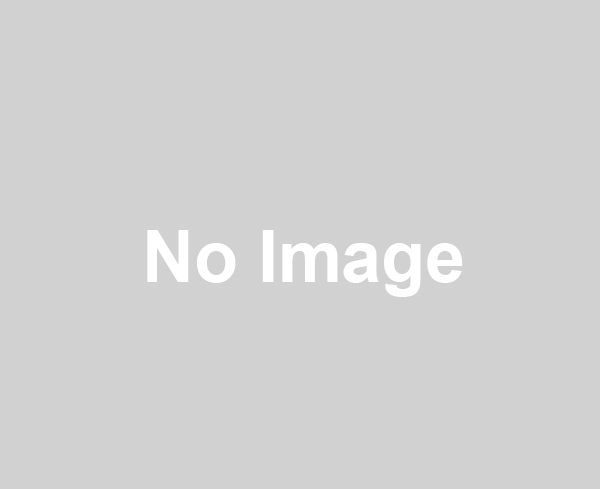
<style>
.page{position:relative;width:600px;height:489px;background:#d1d1d1}
.page>*{position:absolute;margin:0}
.t1{font:72px "Arial-BoldMT";color:#ffffff}
</style>
<div class="page">
<p class="t1" style="left:147px;top:230px;width:316px;height:67px">No Image</p>
</div>
